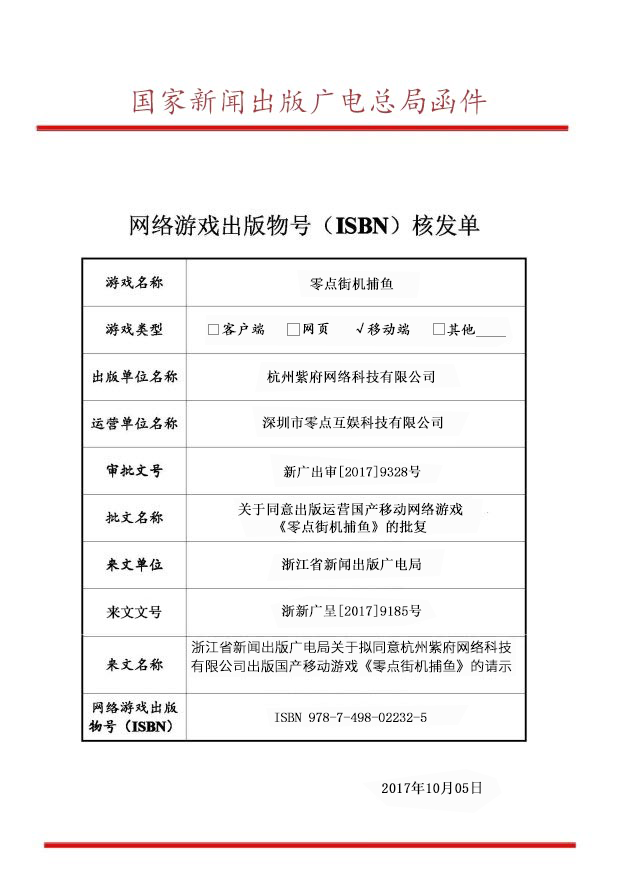
<style>
.page{position:relative;width:620px;height:877px;background:#ffffff}
.page>*{position:absolute;margin:0}
.t1{font:13.7px "SimSun";color:#000000;font-weight:bold}
.t2{font:14.1px "FZKTJW--GB1-0";color:#000000;font-weight:bold}
.t3{font:14.8px "SimSun";color:#000000;font-weight:bold}
.t4{font:14.6px "FZKTJW--GB1-0";color:#000000;font-weight:bold}
.t5{font:13.3px "SimSun";color:#000000;font-weight:bold}
.t6{font:13.5px "SimSun";color:#000000;font-weight:bold}
.t7{font:13.6px "SourceHanSansCN-Light";color:#000000;font-weight:bold}
.t8{font:13.2px "SimSun";color:#000000;font-weight:bold}
.t9{font:14px "SimSun";color:#000000;font-weight:bold}
</style>
<div class="page">
<p class="t1" style="left:310px;top:277px;width:84px;height:14px">零点街机捕鱼</p>
<p class="t2" style="left:222px;top:322px;width:43px;height:14px">客户端</p>
<p class="t2" style="left:303px;top:322px;width:26px;height:13px">网页</p>
<p class="t3" style="left:356px;top:322px;width:8px;height:12px">√</p>
<p class="t4" style="left:367px;top:322px;width:43px;height:14px">移动端</p>
<p class="t2" style="left:447px;top:323px;width:28px;height:13px">其他</p>
<p class="t1" style="left:267px;top:370px;width:168px;height:14px">杭州紫府网络科技有限公司</p>
<p class="t1" style="left:262px;top:416px;width:181px;height:13px">深圳市零点互娱科技有限公司</p>
<p class="t5" style="left:283px;top:465px;width:138px;height:13px">新广出审[2017]9328号</p>
<p class="t1" style="left:238px;top:502px;width:225px;height:14px">关于同意出版运营国产移动网络游戏</p>
<p class="t1" style="left:280px;top:520px;width:147px;height:14px">《零点街机捕鱼》的批复</p>
<p class="t1" style="left:281px;top:557px;width:140px;height:14px">浙江省新闻出版广电局</p>
<p class="t6" style="left:281px;top:604px;width:141px;height:13px">浙新广呈[2017]9185号</p>
<p class="t7" style="left:191px;top:640px;width:321px;height:14px">浙江省新闻出版广电局关于拟同意杭州紫府网络科技</p>
<p class="t7" style="left:191px;top:659px;width:321px;height:14px">有限公司出版国产移动游戏《零点街机捕鱼》的请示</p>
<p class="t8" style="left:274px;top:712px;width:153px;height:10px">ISBN 978-7-498-02232-5</p>
<p class="t9" style="left:382px;top:781px;width:99px;height:14px">2017年10月05日</p>
</div>
